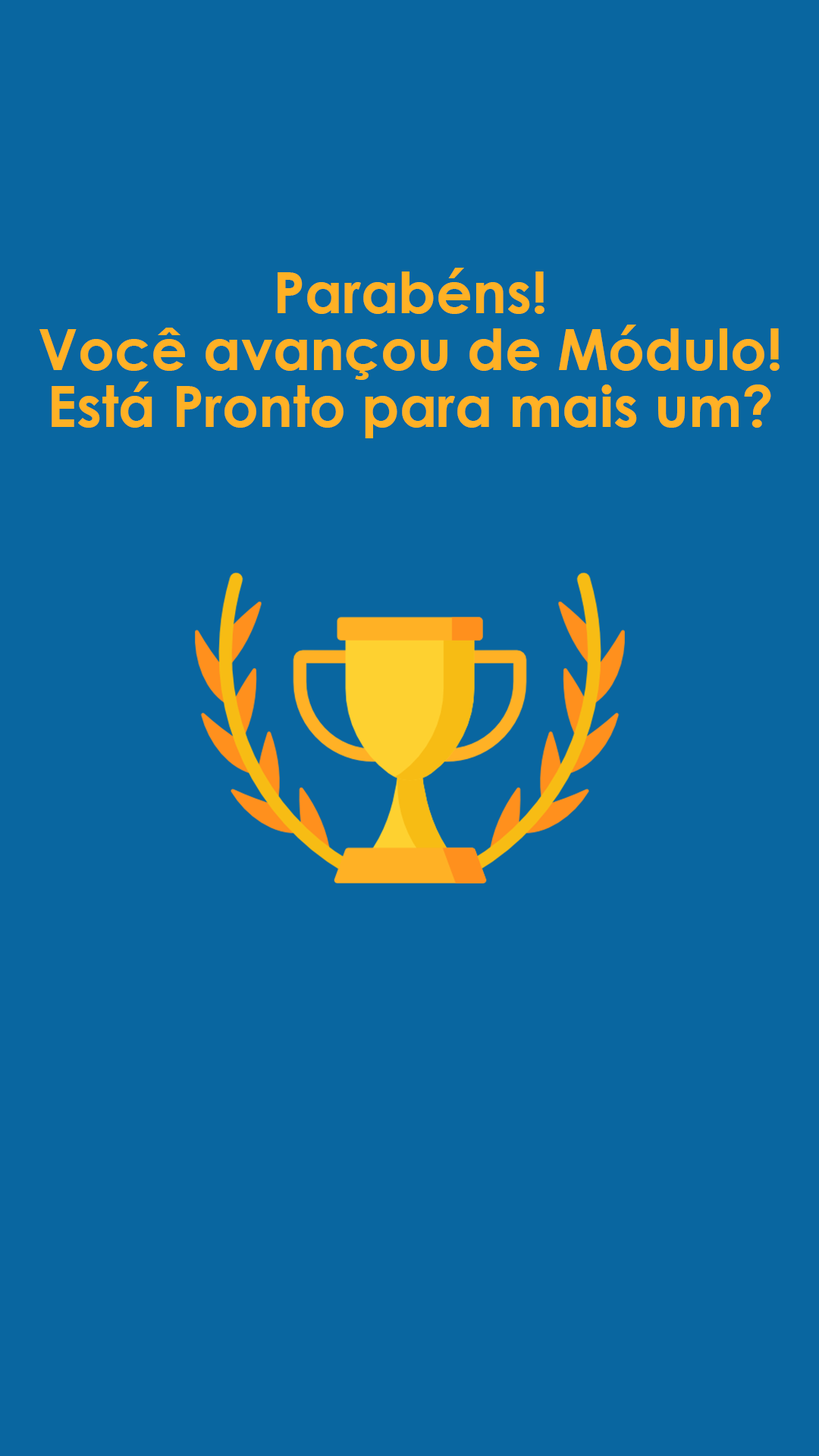
<style>
.page{position:relative;width:819px;height:1456px;background:#0966a0}
.page>*{position:absolute;margin:0}
.t1{font:56.9px/56.9px "CenturyGothic-Bold";color:#ffb125}
</style>
<div class="page">
<p class="t1" style="left:39px;top:268px;width:741px;height:170px;text-align:center">Parabéns!<br>Você avançou de Módulo!<br>Está Pronto para mais um?</p>
</div>
